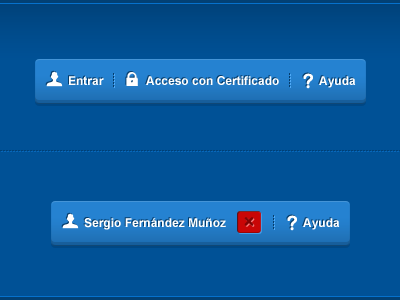
<style>
.page{position:relative;width:400px;height:300px;background:#005196}
.page>*{position:absolute;margin:0}
.t1{font:12px "Arial-BoldMT";color:#ffffff}
</style>
<div class="page">
<p class="t1" style="left:69px;top:76px;width:35px;height:9px">Entrar</p>
<p class="t1" style="left:146px;top:76px;width:133px;height:9px">Acceso con Certificado</p>
<p class="t1" style="left:319px;top:76px;width:37px;height:12px">Ayuda</p>
<p class="t1" style="left:84px;top:218px;width:142px;height:12px">Sergio Fernández Muñoz</p>
<p class="t1" style="left:303px;top:218px;width:37px;height:12px">Ayuda</p>
</div>
